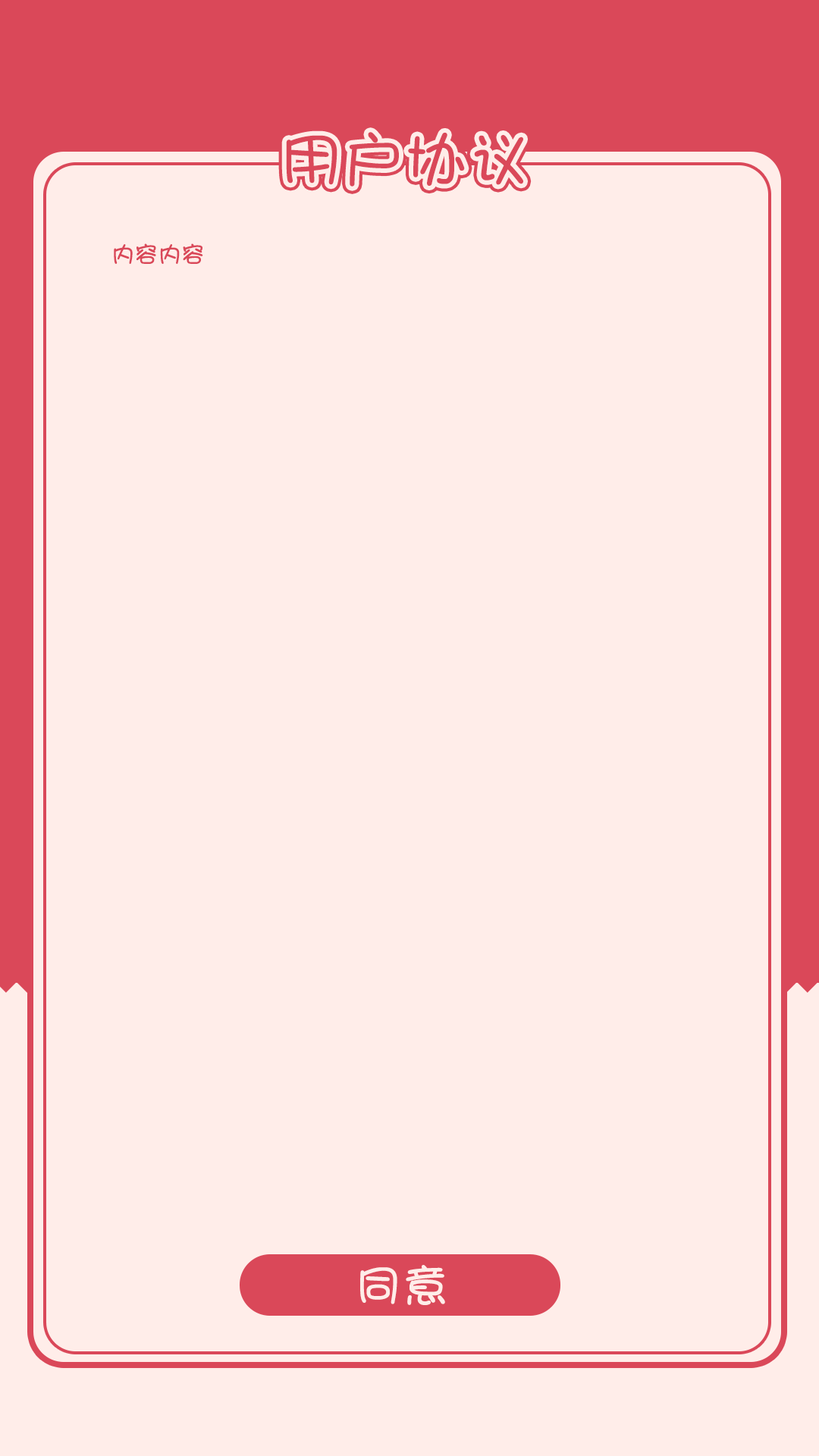
<style>
.page{position:relative;width:819px;height:1456px;background:#ffede9}
.page>*{position:absolute;margin:0}
.t1{font:60.7px "DFShaoNvW5";color:#da4859;font-weight:bold}
.t2{font:22.7px "DFShaoNvW5";color:#da4859;font-weight:bold}
.t3{font:45.5px "DFShaoNvW5";color:#ffede9;font-weight:bold}
</style>
<div class="page">
<p class="t1" style="left:286px;top:132px;width:237px;height:55px">用户协议</p>
<p class="t2" style="left:114px;top:243px;width:89px;height:21px">内容内容</p>
<p class="t3" style="left:360px;top:1265px;width:85px;height:40px">同意</p>
</div>
